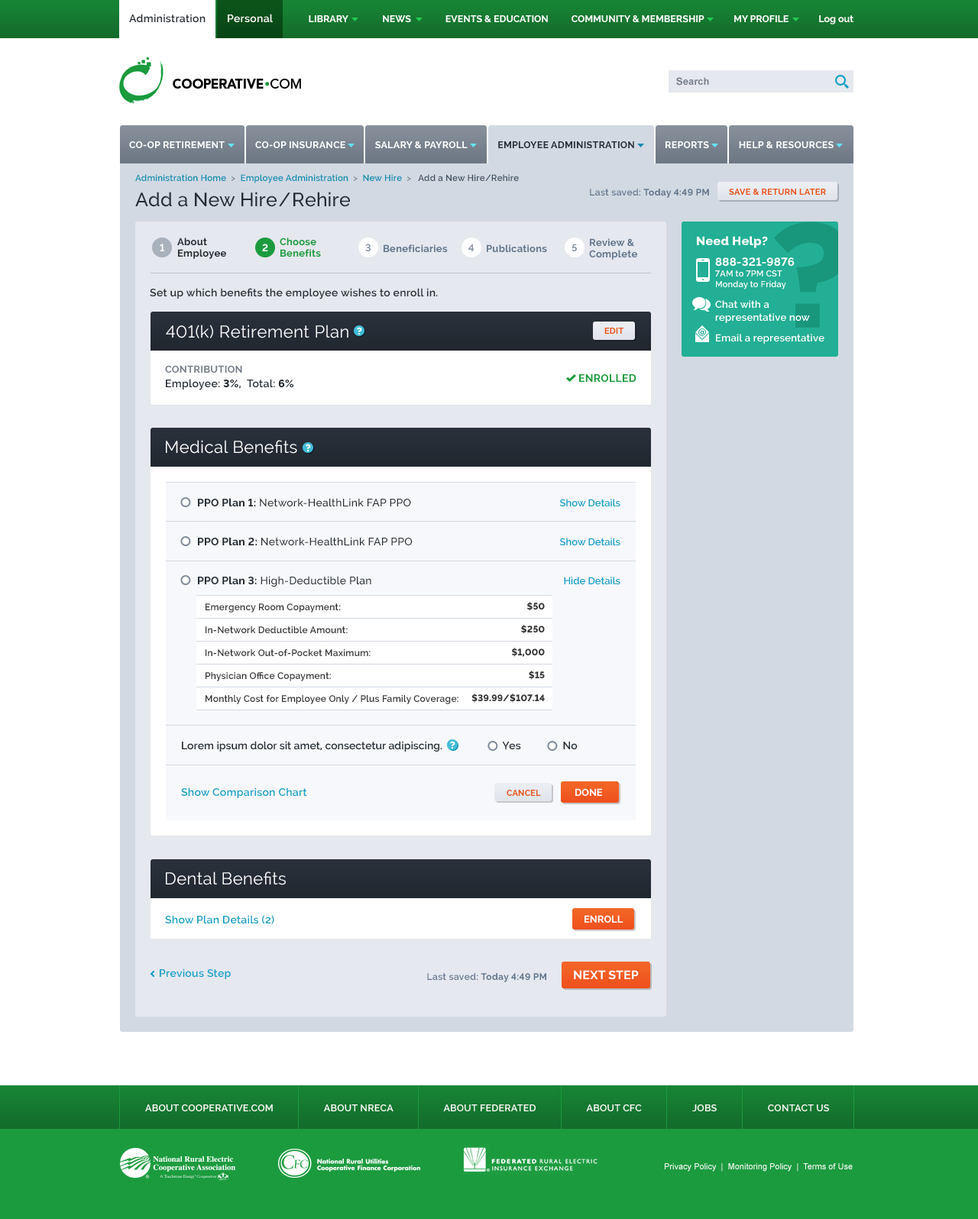
<style>
.page{position:relative;width:978px;height:1219px;background:#ffffff}
.page>*{position:absolute;margin:0}
.t1{font:10.7px "Raleway-SemiBold";letter-spacing:0.02em;color:#252c35}
.t2{font:10.7px "Raleway-SemiBold";letter-spacing:0.02em;color:#ffffff}
.t3{font:9.6px "Raleway-Bold";color:#ffffff;text-transform:uppercase}
.t4{font:9.6px "Raleway-Bold";color:#ffffff}
.t5{font:9.9px "Arial-BoldMT";color:#767e8a}
.t6{font:9.6px "Raleway-Bold";letter-spacing:0.02em;color:#ffffff;text-transform:uppercase}
.t7{font:9.6px "Raleway-Bold";letter-spacing:0.02em;color:#252c35;text-transform:uppercase}
.t8{font:8.8px "Raleway-SemiBold";letter-spacing:0.02em;color:#0c8cb0}
.t9{font:8.8px "Raleway-SemiBold";letter-spacing:0.02em;color:#818c9b}
.t10{font:8.8px "Raleway-SemiBold";letter-spacing:0.02em;color:#435060}
.t11{font:19.1px "Raleway-Medium";letter-spacing:0.01em;color:#252c35}
.t12{font:9.2px "Raleway-Bold";letter-spacing:0.03em;color:#62758c}
.t13{font:9.2px "Raleway-SemiBold";letter-spacing:0.03em;color:#62758c}
.t14{font:8.4px "Raleway-Bold";letter-spacing:0.025em;color:#e95117}
.t15{font:9.9px "Raleway-Bold";letter-spacing:0.02em;color:#ffffff}
.t16{font:9.9px/11.5px "Raleway-Bold";letter-spacing:0.02em;color:#252c35}
.t17{font:9.9px/11.5px "Raleway-Bold";letter-spacing:0.02em;color:#1b9b3e}
.t18{font:9.9px "Raleway-Bold";letter-spacing:0.02em;color:#8c96a4}
.t19{font:9.9px "Raleway-Bold";letter-spacing:0.02em;color:#62758c}
.t20{font:9.9px/11.5px "Raleway-Bold";letter-spacing:0.02em;color:#62758c}
.t21{font:9.9px/13px "Raleway-SemiBold";letter-spacing:0.02em;color:#ffffff}
.t22{font:12.2px/15.3px "Raleway-ExtraBold";letter-spacing:0.02em;color:#ffffff}
.t23{font:11.5px/13px "Raleway-Bold";letter-spacing:0.02em;color:#ffffff}
.t24{font:8.4px/10.7px "Raleway-SemiBold";letter-spacing:0.02em;color:#ffffff}
.t25{font:16.8px "Raleway";letter-spacing:0.025em;color:#ffffff}
.t26{font:9.9px "Gotham-Bold";letter-spacing:0.025em;color:#ffffff}
.t27{font:8.4px "Raleway-Bold";letter-spacing:0.02em;color:#e95117;text-transform:uppercase}
.t28{font:9.9px "ARSMaquettePro-Medium";letter-spacing:0.02em;color:#22af95}
.t29{font:9.9px/13px "Raleway-Bold";letter-spacing:0.02em;color:#767e8a;text-transform:uppercase}
.t30{font:10.7px/10.7px "Raleway-SemiBold";letter-spacing:0.02em;color:#252c35}
.t31{font:10.7px/10.7px "Raleway-ExtraBold";letter-spacing:0.02em;color:#252c35;text-transform:uppercase}
.t32{font:10.7px "Raleway-Bold";letter-spacing:0.02em;color:#1b9b3e;text-transform:uppercase}
.t33{font:16.8px "Raleway";letter-spacing:0.02em;color:#ffffff}
.t34{font:10.7px "Raleway-Medium";letter-spacing:0.02em;color:#252c35}
.t35{font:10.7px "Raleway-Bold";letter-spacing:0.02em;color:#252c35}
.t36{font:9.9px "Raleway-SemiBold";color:#15a0c7}
.t37{font:9.2px/13px "Raleway-SemiBold";letter-spacing:0.02em;color:#333333}
.t38{font:9.2px/13px "Raleway-ExtraBold";letter-spacing:0.02em;color:#333333}
.t39{font:10.7px "Raleway-SemiBold";color:#252c35}
.t40{font:10.7px "Raleway-SemiBold";letter-spacing:0.02em;color:#15a0c7}
.t41{font:9.9px "Raleway-Bold";color:#ffffff;text-transform:uppercase}
.t42{font:12.2px "Raleway-Bold";letter-spacing:0.01em;color:#ffffff;text-transform:uppercase}
.t43{font:9.6px "Raleway-SemiBold";letter-spacing:0.02em;color:#ffffff;text-transform:uppercase}
.t44{font:8.4px "ArialMT";color:#ffffff}
</style>
<div class="page">
<p class="t1" style="left:129px;top:14px;width:77px;height:9px">Administration</p>
<p class="t2" style="left:228px;top:14px;width:45px;height:9px">Personal</p>
<p class="t3" style="left:309px;top:15px;width:544px;height:9px">Library               News               events &amp; Education          Community &amp; Membership             MY PROFILE<span class="t4">             Log out</span></p>
<p class="t5" style="left:676px;top:77px;width:33px;height:9px">Search</p>
<p class="t6" style="left:129px;top:141px;width:96px;height:7px">Co-op Retirement</p>
<p class="t6" style="left:255px;top:141px;width:90px;height:8px">Co-op Insurance</p>
<p class="t6" style="left:375px;top:141px;width:93px;height:8px">Salary &amp; Payroll</p>
<p class="t7" style="left:498px;top:141px;width:136px;height:8px">Employee Administration</p>
<p class="t6" style="left:665px;top:141px;width:44px;height:8px">Reports</p>
<p class="t6" style="left:739px;top:141px;width:95px;height:8px">Help &amp; Resources</p>
<p class="t8" style="left:135px;top:174px;width:384px;height:9px">Administration Home<span class="t9">  &gt;  </span>Employee Administration<span class="t9">  &gt;  </span>New Hire<span class="t9">  &gt;   </span><span class="t10">Add a New Hire/Rehire</span></p>
<p class="t11" style="left:135px;top:192px;width:215px;height:15px">Add a New Hire/Rehire</p>
<p class="t12" style="left:590px;top:189px;width:119px;height:9px"><span class="t13">Last saved: </span>Today 4:49 PM</p>
<p class="t14" style="left:729px;top:189px;width:97px;height:6px">SAVE &amp; RETURN LATER</p>
<p class="t15" style="left:160px;top:244px;width:4px;height:7px">1</p>
<p class="t16" style="left:177px;top:238px;width:49px;height:21px">About <br>Employee</p>
<p class="t15" style="left:262px;top:244px;width:6px;height:7px">2</p>
<p class="t17" style="left:280px;top:238px;width:41px;height:19px">Choose <br>Benefits</p>
<p class="t18" style="left:365px;top:244px;width:6px;height:7px">3</p>
<p class="t19" style="left:384px;top:244px;width:64px;height:9px">Beneficiaries</p>
<p class="t18" style="left:468px;top:244px;width:6px;height:7px">4</p>
<p class="t19" style="left:487px;top:244px;width:60px;height:9px">Publications</p>
<p class="t18" style="left:571px;top:244px;width:6px;height:8px">5</p>
<p class="t20" style="left:589px;top:238px;width:48px;height:22px">Review &amp; <br>Complete</p>
<p class="t21" style="left:697px;top:236px;width:127px;height:108px"><span class="t22">Need Help?<br></span><span class="t23">888-321-9876<br></span><span class="t24">7AM to 7PM CST<br>Monday to Friday<br></span>Chat with a representative now<br>Email a representative</p>
<p class="t1" style="left:150px;top:288px;width:288px;height:11px">Set up which benefits the employee wishes to enroll in.</p>
<p class="t25" style="left:166px;top:325px;width:182px;height:13px">401(k) Retirement Plan</p>
<p class="t26" style="left:357px;top:327px;width:5px;height:8px">?</p>
<p class="t27" style="left:604px;top:328px;width:19px;height:6px">EDIT</p>
<p class="t28" style="left:698px;top:329px;width:9px;height:7px">@</p>
<p class="t29" style="left:165px;top:365px;width:128px;height:25px">CONTRIBUTION<br><span class="t30">Employee: </span><span class="t31">3%</span><span class="t30">,  Total: </span><span class="t31">6%</span></p>
<p class="t32" style="left:579px;top:374px;width:57px;height:8px">Enrolled</p>
<p class="t33" style="left:166px;top:440px;width:131px;height:14px">Medical Benefits</p>
<p class="t26" style="left:306px;top:444px;width:5px;height:8px">?</p>
<p class="t34" style="left:198px;top:498px;width:213px;height:9px"><span class="t35">PPO Plan 1: </span>Network-HealthLink FAP PPO</p>
<p class="t36" style="left:559px;top:499px;width:61px;height:8px">Show Details</p>
<p class="t34" style="left:198px;top:537px;width:215px;height:9px"><span class="t35">PPO Plan 2: </span>Network-HealthLink FAP PPO</p>
<p class="t36" style="left:559px;top:538px;width:61px;height:8px">Show Details</p>
<p class="t34" style="left:198px;top:576px;width:173px;height:11px"><span class="t35">PPO Plan 3: </span>High-Deductible Plan</p>
<p class="t36" style="left:564px;top:577px;width:56px;height:8px">Hide Details</p>
<p class="t37" style="left:206px;top:604px;width:252px;height:100px">Emergency Room Copayment:<br>In-Network Deductible Amount:<br>In-Network Out-of-Pocket Maximum:<br>Physician Office Copayment:<br>Monthly Cost for Employee Only / Plus Family Coverage:</p>
<p class="t38" style="left:471px;top:602px;width:74px;height:101px;text-align:right">$50<br>$250<br>$1,000<br>$15<br>$39.99/$107.14</p>
<p class="t39" style="left:182px;top:741px;width:396px;height:11px">Lorem ipsum dolor sit amet, consectetur adipiscing.                       Yes                No</p>
<p class="t26" style="left:450px;top:741px;width:5px;height:8px">?</p>
<p class="t40" style="left:181px;top:788px;width:126px;height:10px">Show Comparison Chart</p>
<p class="t27" style="left:507px;top:790px;width:34px;height:6px">Cancel</p>
<p class="t41" style="left:575px;top:788px;width:27px;height:8px">Done</p>
<p class="t33" style="left:166px;top:872px;width:120px;height:13px">Dental Benefits</p>
<p class="t40" style="left:165px;top:915px;width:109px;height:9px">Show Plan Details (2)</p>
<p class="t41" style="left:584px;top:915px;width:39px;height:8px">ENROLL</p>
<p class="t40" style="left:160px;top:969px;width:71px;height:10px">Previous Step</p>
<p class="t12" style="left:427px;top:973px;width:119px;height:10px"><span class="t13">Last saved: </span>Today 4:49 PM</p>
<p class="t42" style="left:574px;top:970px;width:65px;height:10px">Next Step</p>
<p class="t43" style="left:145px;top:1105px;width:684px;height:7px">About Cooperative.com                    About NRECA                    About Federated                    About CFC                    Jobs                    Contact Us</p>
<p class="t44" style="left:665px;top:1164px;width:188px;height:8px">Privacy Policy  |  Monitoring Policy  |  Terms of Use</p>
</div>
